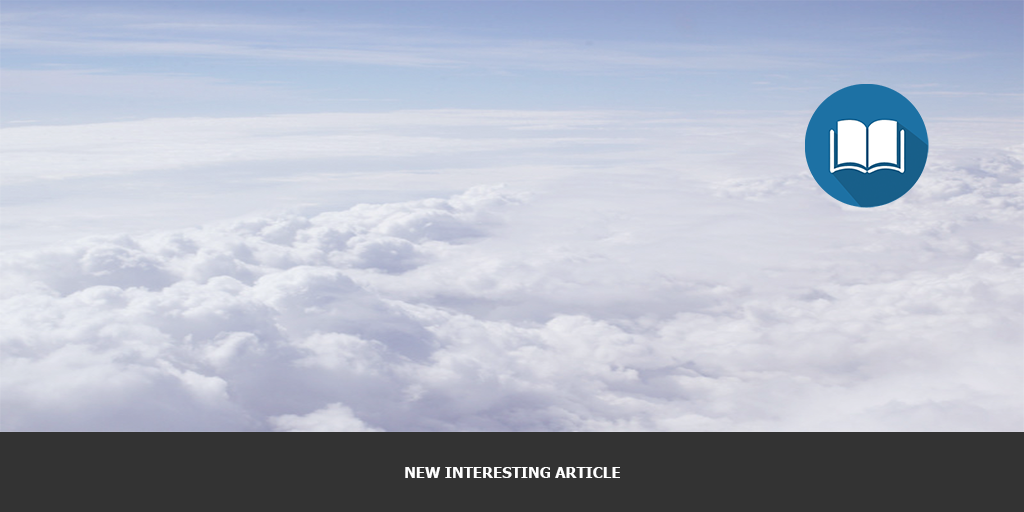
<style>
.page{position:relative;width:1024px;height:512px}
.page>*{position:absolute;margin:0}
.t1{font:15px "Tahoma-Bold";color:#ffffff;text-transform:uppercase}
</style>
<div class="page">
<p class="t1" style="left:405px;top:467px;width:215px;height:11px">New Interesting Article</p>
</div>
